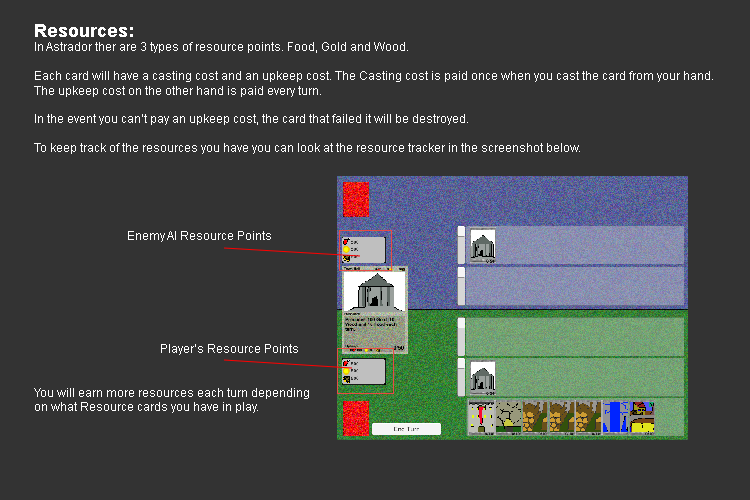
<style>
.page{position:relative;width:750px;height:500px;background:#333333}
.page>*{position:absolute;margin:0}
.t1{font:12px "ArialMT";color:#ffffff}
.t2{font:18px "Arial-BoldMT";color:#ffffff}
</style>
<div class="page">
<p class="t1" style="left:34px;top:24px;width:679px;height:389px"><span class="t2">Resources:<br></span>In Astrador ther are 3 types of resource points. Food, Gold and Wood.<br><br>Each card will have a casting cost and an upkeep cost. The Casting cost is paid once when you cast the card from your hand.<br>The upkeep cost on the other hand is paid every turn.<br><br>In the event you can’t pay an upkeep cost, the card that failed it will be destroyed.<br><br>To keep track of the resources you have you can look at the resource tracker in the screenshot below.<br><br><br><br><br><br><br><br><br><br><br><br><br><br><br><br><br>You will earn more resources each turn depending<br>on what Resource cards you have in play.</p>
<p class="t1" style="left:128px;top:231px;width:143px;height:11px">Enemy AI Resource Points</p>
<p class="t1" style="left:161px;top:344px;width:137px;height:11px">Player’s Resource Points</p>
</div>
